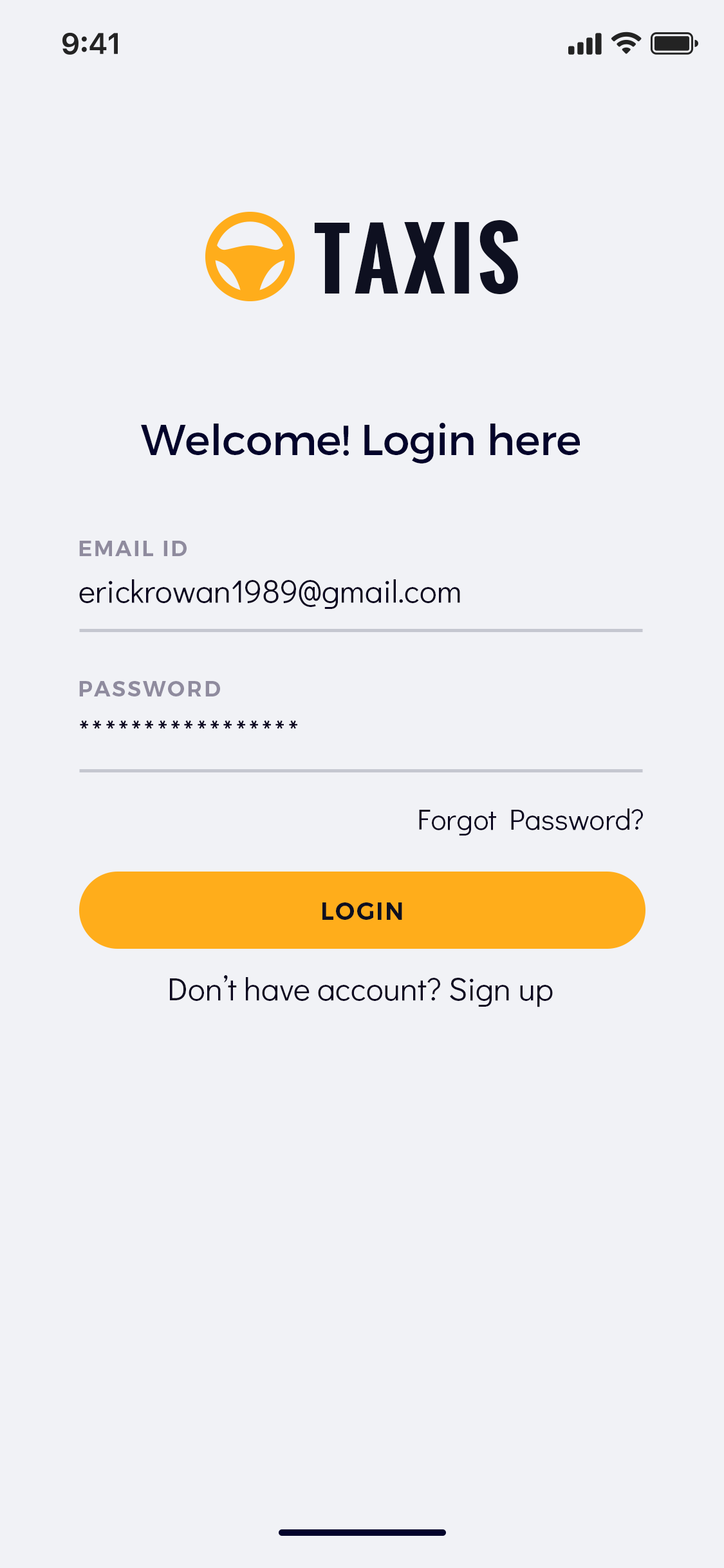
<style>
.page{position:relative;width:724px;height:1568px;background:#f1f2f6}
.page>*{position:absolute;margin:0}
.t1{font:80.5px "Oswald-Bold";letter-spacing:0.06em;color:#0e1020;text-transform:uppercase}
.t2{font:42.9px "Montserrat-Regular";letter-spacing:-0.01em;color:#03032b}
.t3{font:21.5px "Montserrat-SemiBold";letter-spacing:0.08em;color:#8f8b9e;text-transform:uppercase}
.t4{font:32.2px "DidactGothic-Regular";color:#0c0720}
.t5{font:32.2px "DidactGothic-Regular";letter-spacing:0.05em;color:#0c0720}
.t6{font:29.5px "DidactGothic-Regular";color:#0c0720}
.t7{font:24.1px "Montserrat-SemiBold";letter-spacing:0.06em;color:#0e1020;text-transform:uppercase}
</style>
<div class="page">
<p class="t1" style="left:314px;top:220px;width:204px;height:74px">TAXIS</p>
<p class="t2" style="left:141px;top:422px;width:439px;height:41px">Welcome! Login here</p>
<p class="t3" style="left:79px;top:541px;width:108px;height:15px">Email id</p>
<p class="t4" style="left:79px;top:579px;width:381px;height:30px">erickrowan1989@gmail.com</p>
<p class="t3" style="left:79px;top:681px;width:141px;height:15px">PASSWORD</p>
<p class="t5" style="left:80px;top:720px;width:217px;height:9px">*****************</p>
<p class="t6" style="left:419px;top:808px;width:224px;height:27px">Forgot Password?</p>
<p class="t7" style="left:322px;top:902px;width:80px;height:18px">Login</p>
<p class="t4" style="left:170px;top:975px;width:383px;height:32px">Don’t have account? Sign up</p>
</div>
